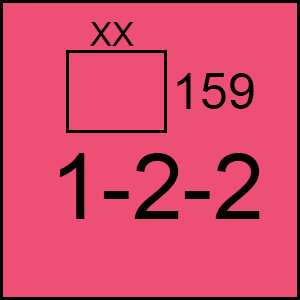
<style>
.page{position:relative;width:300px;height:300px;background:#ee4f74}
.page>*{position:absolute;margin:0}
.t1{font:33.3px "ArialMT";color:#000000}
.t2{font:50px "ArialMT";color:#000000}
.t3{font:91.7px "ArialMT";color:#000000}
</style>
<div class="page">
<p class="t1" style="left:90px;top:22px;width:44px;height:24px">XX</p>
<p class="t2" style="left:177px;top:73px;width:77px;height:36px">159</p>
<p class="t3" style="left:60px;top:153px;width:200px;height:66px">1-2-2</p>
</div>
